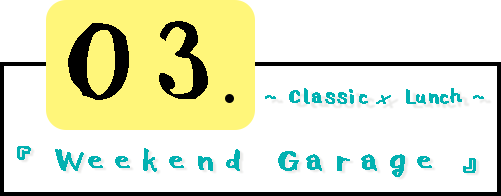
<style>
.page{position:relative;width:501px;height:196px;background:#ffffff}
.page>*{position:absolute;margin:0}
.t1{font:140px "001Shirokuma-Regular";letter-spacing:-0.36em;color:#000000}
.t2{font:140px "KozGoPr6N-Regular";letter-spacing:-0.36em;color:#000000}
.t3{font:24px "001Shirokuma-Regular";letter-spacing:-0.56em;color:#02b1b1;font-weight:bold}
.t4{font:24px "SnellRoundhand";letter-spacing:-0.56em;color:#02b1b1;font-weight:bold}
.t5{font:36px "001Shirokuma-Regular";letter-spacing:-0.26em;color:#02b1b1;font-weight:bold}
</style>
<div class="page">
<p class="t1" style="left:68px;top:23px;width:61px;height:77px">0</p>
<p class="t1" style="left:159px;top:21px;width:49px;height:78px"><span class="t2">　</span>3</p>
<p class="t3" style="left:265px;top:88px;width:219px;height:16px">~ Classic <span class="t4">×</span>  Lunch ~</p>
<p class="t5" style="left:17px;top:146px;width:459px;height:31px">『 Weekend Garage 』</p>
</div>
